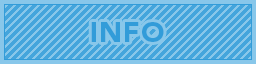
<style>
.page{position:relative;width:256px;height:64px;background:#88c7ea}
.page>*{position:absolute;margin:0}
.t1{font:28px "AvenirLTStd-Black";letter-spacing:0.05em;color:#329cd9;text-transform:uppercase}
</style>
<div class="page">
<p class="t1" style="left:91px;top:22px;width:73px;height:20px">Info</p>
</div>
